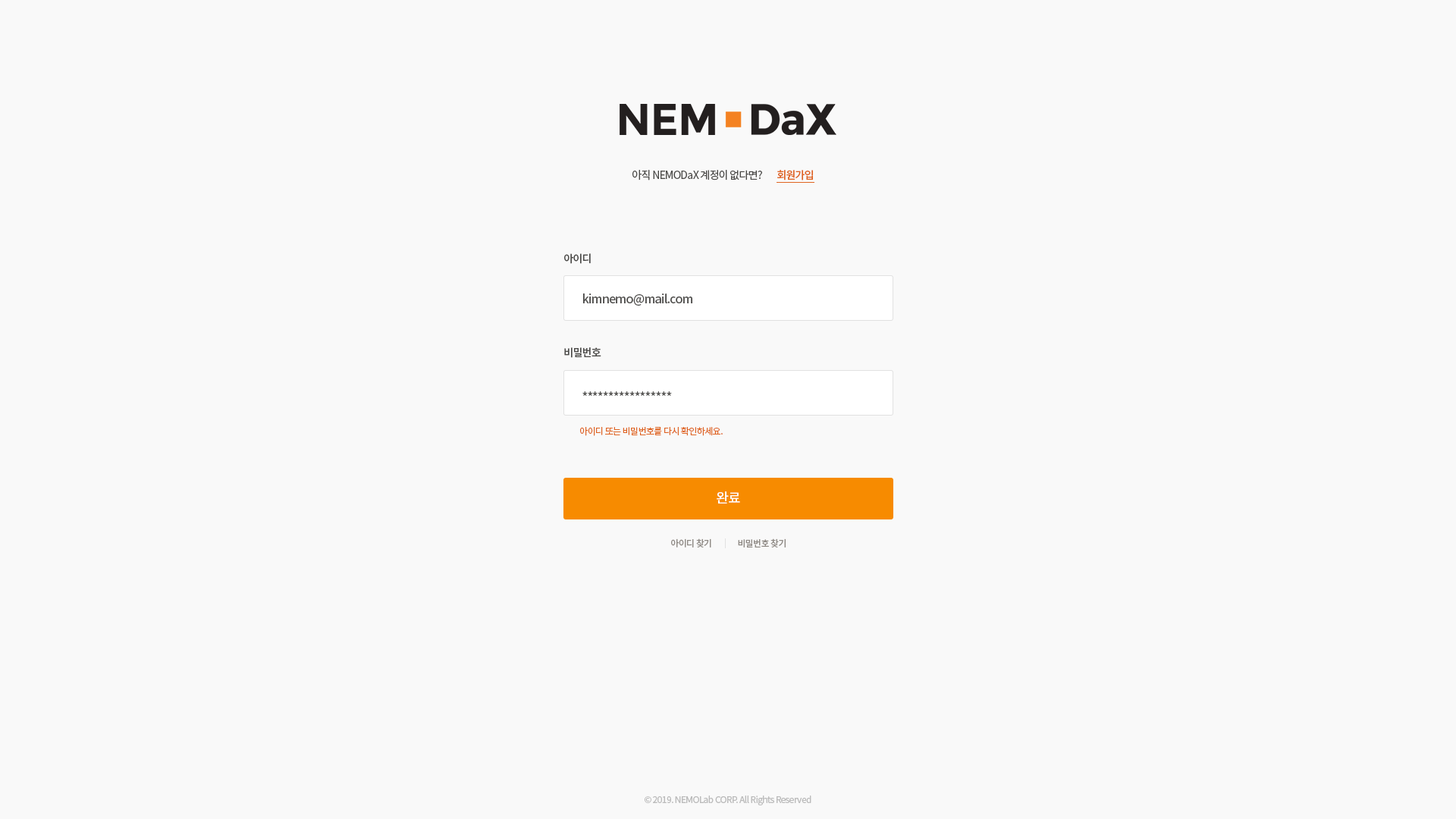
<style>
.page{position:relative;width:1456px;height:819px;background:#f9f9f9}
.page>*{position:absolute;margin:0}
.t1{font:10.6px "NotoSansCJKkr-Regular";letter-spacing:-0.05em;color:#4a4947}
.t2{font:10.6px "NotoSansCJKkr-Medium";letter-spacing:-0.05em;color:#df6421}
.t3{font:10.6px/91px "NotoSansCJKkr-Medium";letter-spacing:-0.05em;color:#4a4947}
.t4{font:12.1px/94.8px "NotoSansCJKkr-Medium";letter-spacing:-0.05em;color:#4a4947}
.t5{font:9.1px "NotoSansCJKkr-Regular";letter-spacing:-0.05em;color:#df6422}
.t6{font:13.6px "NotoSansCJKkr-Medium";letter-spacing:-0.05em;color:#fffefe}
.t7{font:9.1px "NotoSansCJKkr-Medium";letter-spacing:-0.05em;color:#8f8a85}
.t8{font:9.1px "NotoSansCJKkr-Regular";letter-spacing:-0.05em;color:#bbbbbb}
</style>
<div class="page">
<p class="t1" style="left:632px;top:170px;width:130px;height:10px">아직 NEMODaX 계정이 없다면?</p>
<p class="t2" style="left:777px;top:170px;width:36px;height:10px">회원가입</p>
<p class="t3" style="left:564px;top:253px;width:37px;height:105px">아이디<br>비밀번호</p>
<p class="t4" style="left:582px;top:293px;width:110px;height:103px">kimnemo@mail.com<br>*****************</p>
<p class="t5" style="left:580px;top:427px;width:143px;height:9px">아이디 또는 비밀번호를 다시 확인하세요.</p>
<p class="t6" style="left:717px;top:491px;width:23px;height:13px">완료</p>
<p class="t7" style="left:671px;top:538px;width:115px;height:10px">아이디 찾기                비밀번호 찾기</p>
<p class="t8" style="left:645px;top:795px;width:166px;height:10px">© 2019. NEMOLab CORP. All Rights Reserved</p>
</div>
